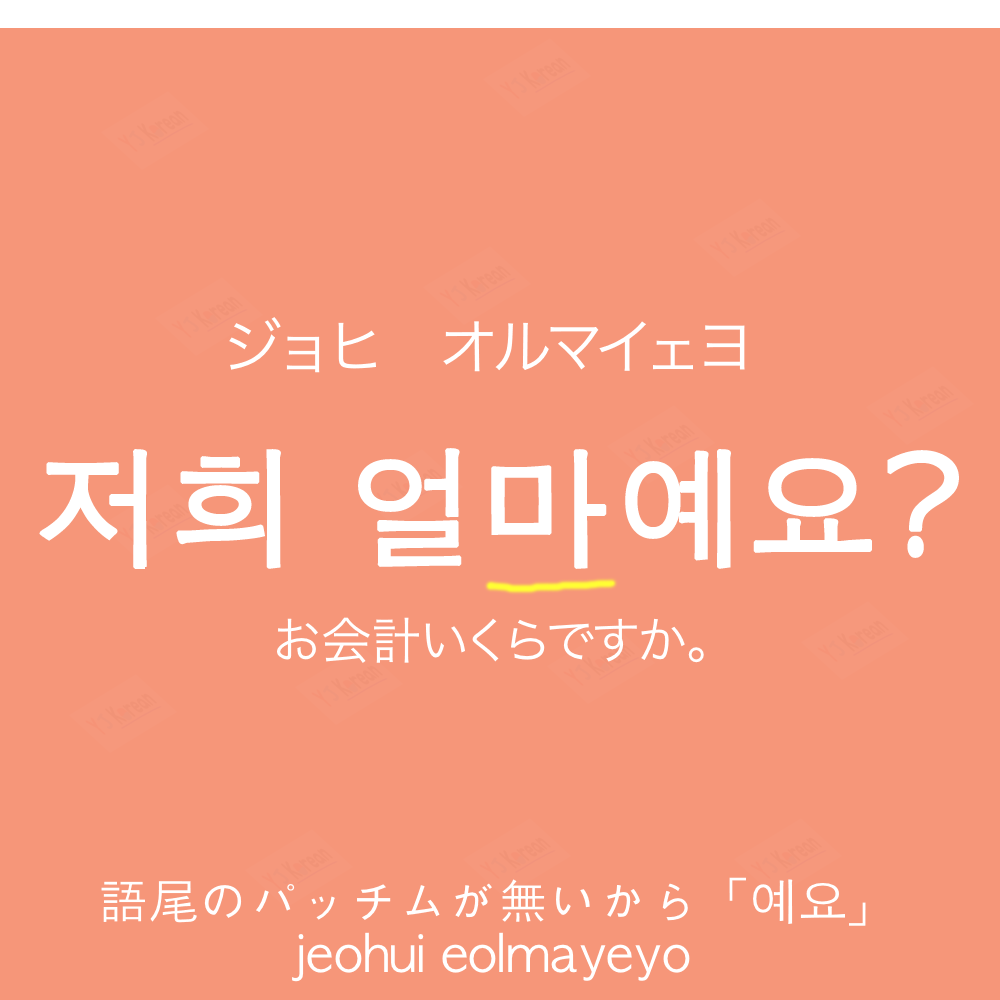
<style>
.page{position:relative;width:1000px;height:1000px;background:#f69679}
.page>*{position:absolute;margin:0}
.t1{font:60px "HiraKakuProN-W3";color:#ffffff;text-transform:uppercase}
.t2{font:130px "AppleGothic";color:#ffffff;font-weight:bold}
.t3{font:50px "HiraKakuProN-W3";color:#ffffff}
.t4{font:50px "AppleGothic";color:#ffffff}
</style>
<div class="page">
<p class="t1" style="left:229px;top:317px;width:516px;height:56px">ジョヒ　オルマイェヨ</p>
<p class="t2" style="left:39px;top:448px;width:920px;height:121px">저희 얼마예요?</p>
<p class="t3" style="left:277px;top:617px;width:427px;height:46px">お会計いくらですか。</p>
<p class="t4" style="left:292px;top:932px;width:398px;height:50px">jeohui eolmayeyo</p>
</div>
